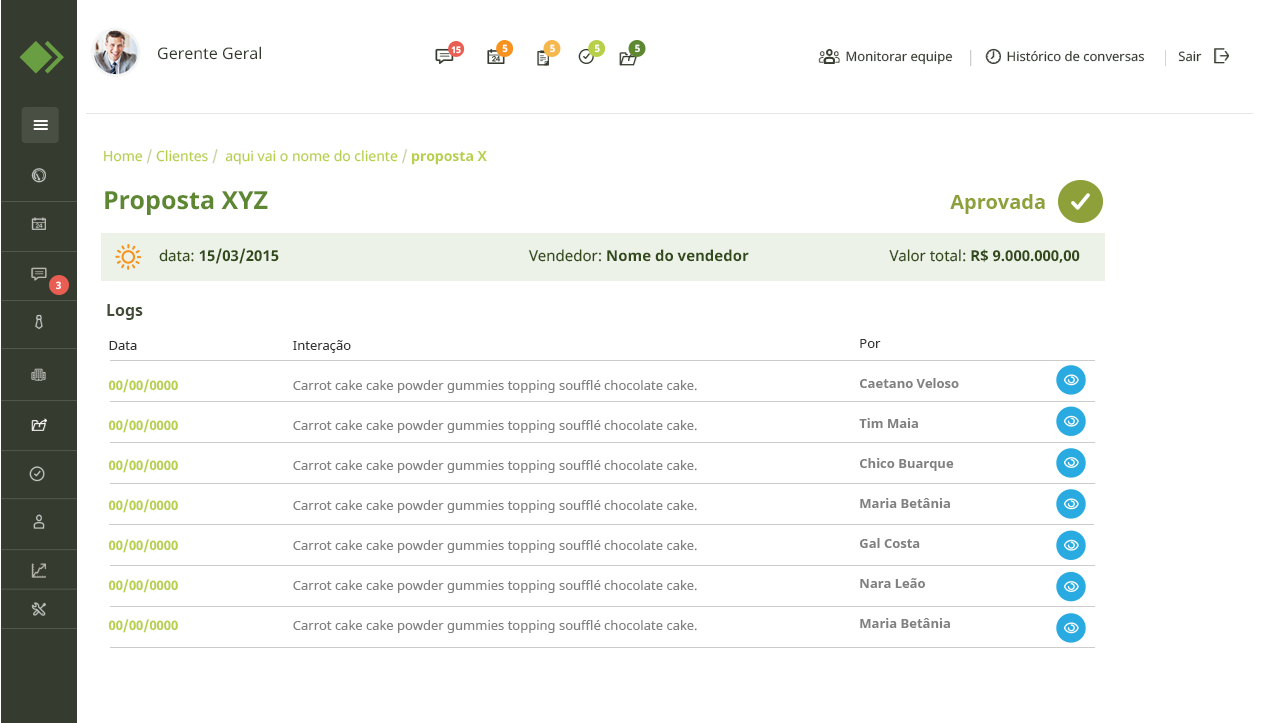
<style>
.page{position:relative;width:1280px;height:723px;background:#ffffff}
.page>*{position:absolute;margin:0}
.t1{font:16px "NotoSans";color:#353b2f}
.t2{font:9px "NotoSans-Bold";color:#ffffff}
.t3{font:10px "NotoSans-Bold";color:#ffffff}
.t4{font:13px "NotoSans";color:#353b2f}
.t5{font:14px "NotoSans";color:#b8cf49}
.t6{font:14px "NotoSans";color:#c7cfa1}
.t7{font:14px "NotoSans-Bold";color:#b8cf49}
.t8{font:25px "NotoSans-Bold";color:#5d8730}
.t9{font:20px "NotoSans-Bold";color:#8ea139}
.t10{font:15px "NotoSans-Bold";color:#324a1a}
.t11{font:15px "NotoSans";color:#324a1a}
.t12{font:16px "NotoSans-Bold";color:#424d38}
.t13{font:13px/40px "NotoSans-Bold";color:#b8cf49}
.t14{font:13px/40px "NotoSans";color:#333333}
.t15{font:13px/40px "NotoSans";color:#808080}
.t16{font:13px/40px "NotoSans-Bold";color:#808080}
</style>
<div class="page">
<p class="t1" style="left:158px;top:46px;width:103px;height:14px">Gerente Geral</p>
<p class="t2" style="left:451px;top:46px;width:10px;height:8px">15</p>
<p class="t3" style="left:502px;top:44px;width:6px;height:9px">5</p>
<p class="t3" style="left:550px;top:44px;width:5px;height:9px">5</p>
<p class="t3" style="left:595px;top:44px;width:5px;height:9px">5</p>
<p class="t3" style="left:635px;top:44px;width:5px;height:9px">5</p>
<p class="t4" style="left:846px;top:50px;width:356px;height:15px">Monitorar equipe                Histórico de conversas          Sair</p>
<p class="t5" style="left:104px;top:149px;width:383px;height:16px">Home <span class="t6">/</span> Clientes <span class="t6">/  </span>aqui vai o nome do cliente <span class="t6">/ </span><span class="t7">proposta X</span></p>
<p class="t8" style="left:105px;top:191px;width:163px;height:24px">Proposta XYZ</p>
<p class="t9" style="left:950px;top:194px;width:95px;height:20px">Aprovada</p>
<p class="t10" style="left:159px;top:248px;width:120px;height:16px"><span class="t11">data: </span>15/03/2015</p>
<p class="t10" style="left:528px;top:249px;width:221px;height:13px"><span class="t11">Vendedor: </span>Nome do vendedor</p>
<p class="t10" style="left:889px;top:249px;width:191px;height:14px"><span class="t11">Valor total: </span>R$ 9.000.000,00</p>
<p class="t3" style="left:56px;top:281px;width:5px;height:9px">3</p>
<p class="t12" style="left:107px;top:304px;width:36px;height:16px">Logs</p>
<p class="t13" style="left:108px;top:341px;width:70px;height:292px"><span class="t14">Data<br></span>00/00/0000<br>00/00/0000<br>00/00/0000<br>00/00/0000<br>00/00/0000<br>00/00/0000<br>00/00/0000</p>
<p class="t15" style="left:293px;top:340px;width:404px;height:293px"><span class="t14">Interação<br></span>Carrot cake cake powder gummies topping soufflé chocolate cake.<br>Carrot cake cake powder gummies topping soufflé chocolate cake.<br>Carrot cake cake powder gummies topping soufflé chocolate cake.<br>Carrot cake cake powder gummies topping soufflé chocolate cake.<br>Carrot cake cake powder gummies topping soufflé chocolate cake.<br>Carrot cake cake powder gummies topping soufflé chocolate cake.<br>Carrot cake cake powder gummies topping soufflé chocolate cake.</p>
<p class="t16" style="left:859px;top:339px;width:100px;height:289px"><span class="t14">Por<br></span>Caetano Veloso<br>Tim Maia<br>Chico Buarque<br>Maria Betânia<br>Gal Costa<br>Nara Leão<br>Maria Betânia</p>
</div>
